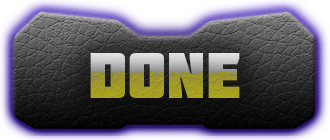
<style>
.page{position:relative;width:330px;height:140px}
.page>*{position:absolute;margin:0}
.t1{font:65px "Molot"}
</style>
<div class="page">
<p class="t1" style="left:90px;top:53px;width:150px;height:45px">DONE</p>
</div>
